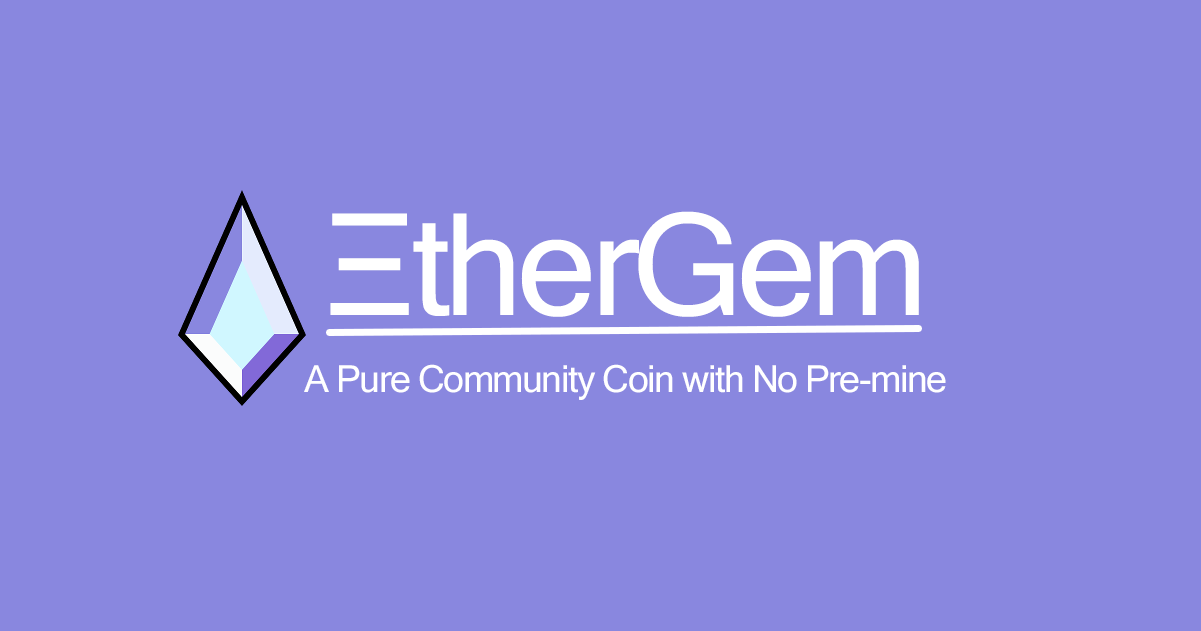
<style>
.page{position:relative;width:1201px;height:631px;background:#8987df}
.page>*{position:absolute;margin:0}
.t1{font:141.7px "MicrosoftSansSerif";letter-spacing:-0.04em;color:#ffffff}
.t2{font:37.5px "MicrosoftSansSerif";letter-spacing:-0.04em;color:#ffffff}
</style>
<div class="page">
<p class="t1" style="left:330px;top:211px;width:589px;height:106px">ΞtherGem</p>
<p class="t2" style="left:304px;top:364px;width:642px;height:36px">A Pure Community Coin with No Pre-mine</p>
</div>
